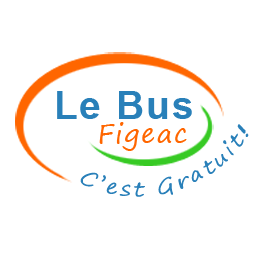
<style>
.page{position:relative;width:260px;height:260px;background:#ffffff}
.page>*{position:absolute;margin:0}
.t1{font:39px "Arial-BoldMT";letter-spacing:0.05em;color:#2980b9}
.t2{font:20.8px "SegoePrint";letter-spacing:0.05em;color:#2980b9}
.t3{font:27.3px "SegoePrint";letter-spacing:0.05em;color:#ff6600}
</style>
<div class="page">
<p class="t1" style="left:57px;top:91px;width:135px;height:28px">Le Bus</p>
<p class="t2" style="left:80px;top:124px;width:169px;height:73px;rotate:-19deg">C’est Gratuit!</p>
<p class="t3" style="left:99px;top:122px;width:88px;height:29px">Figeac</p>
</div>
